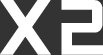
<style>
.page{position:relative;width:103px;height:55px;background:#333333}
.page>*{position:absolute;margin:0}
.t1{font:70px "HelloFont-WenYiHei";color:#ffffff;font-weight:bold}
</style>
<div class="page">
<p class="t1" style="left:0px;top:0px;width:103px;height:55px">X2</p>
</div>
